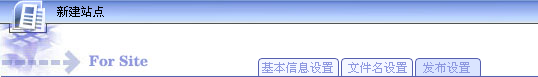
<style>
.page{position:relative;width:538px;height:77px;background:#ffffff}
.page>*{position:absolute;margin:0}
.t1{font:12px "SimSun";color:#8e98df}
</style>
<div class="page">
<p class="t1" style="left:262px;top:62px;width:71px;height:11px">基本信息设置</p>
<p class="t1" style="left:348px;top:62px;width:59px;height:11px">文件名设置</p>
<p class="t1" style="left:423px;top:62px;width:47px;height:11px">发布设置</p>
</div>
